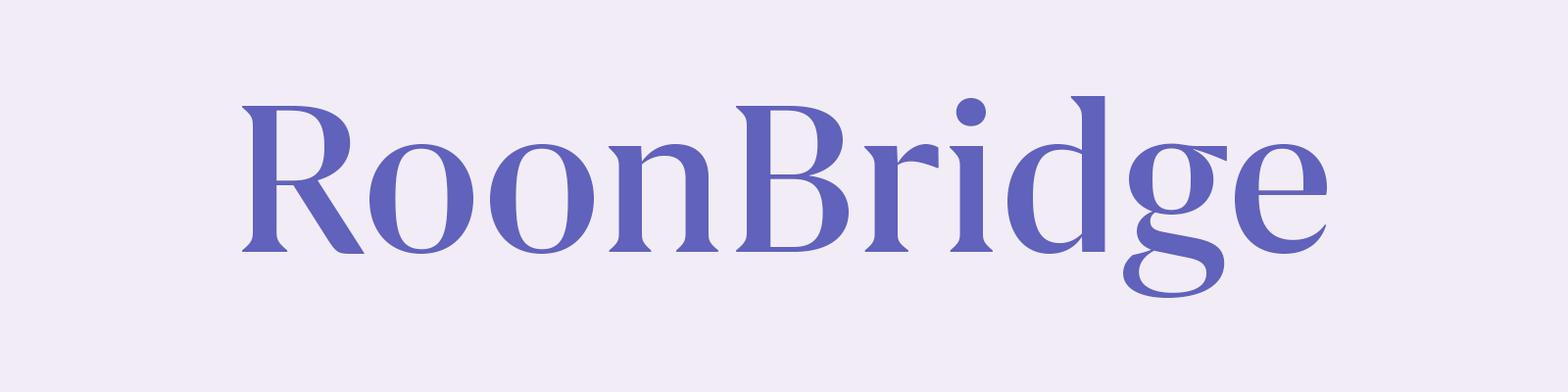
<style>
.page{position:relative;width:1568px;height:392px;background:#f2ecf6}
.page>*{position:absolute;margin:0}
.t1{font:243.7px "GrifoM-Medium";color:#6062bb}
</style>
<div class="page">
<p class="t1" style="left:242px;top:96px;width:1085px;height:202px">RoonBridge</p>
</div>
